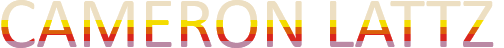
<style>
.page{position:relative;width:504px;height:48px;background:#ffffff}
.page>*{position:absolute;margin:0}
.t1{font:72px "Calibri"}
</style>
<div class="page">
<p class="t1" style="left:1px;top:0px;width:493px;height:48px">CAMERON LATTZ</p>
</div>
